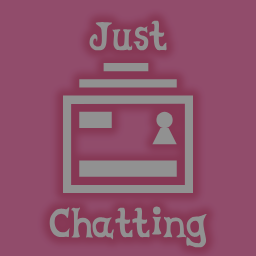
<style>
.page{position:relative;width:256px;height:256px;background:#914c6b}
.page>*{position:absolute;margin:0}
.t1{font:45.2px "CelestiaReduxAltMedium";color:#919191}
</style>
<div class="page">
<p class="t1" style="left:89px;top:20px;width:78px;height:31px">Just</p>
<p class="t1" style="left:49px;top:206px;width:158px;height:42px">Chatting</p>
</div>
